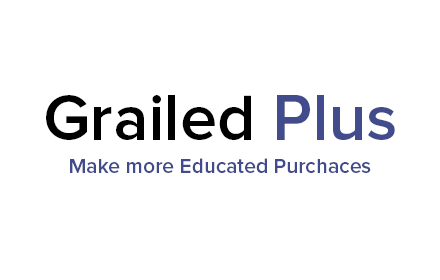
<style>
.page{position:relative;width:440px;height:280px;background:#ffffff}
.page>*{position:absolute;margin:0}
.t1{font:66px "ProximaNova-Semibold";color:#000000}
.t2{font:66px "ProximaNova-Semibold";color:#424b8c}
.t3{font:21px "ProximaNova-Semibold";color:#424b8c}
</style>
<div class="page">
<p class="t1" style="left:46px;top:95px;width:349px;height:45px">Grailed <span class="t2">Plus</span></p>
<p class="t3" style="left:70px;top:158px;width:301px;height:15px">Make more Educated Purchaces</p>
</div>
